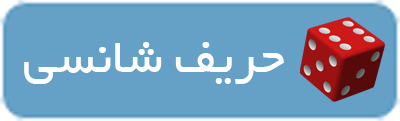
<style>
.page{position:relative;width:400px;height:121px;background:#65a1c6}
.page>*{position:absolute;margin:0}
.t1{font:53.3px "BYekan";color:#ffffff}
</style>
<div class="page">
<p class="t1" style="left:24px;top:42px;width:260px;height:42px">حریف شانسی</p>
</div>
